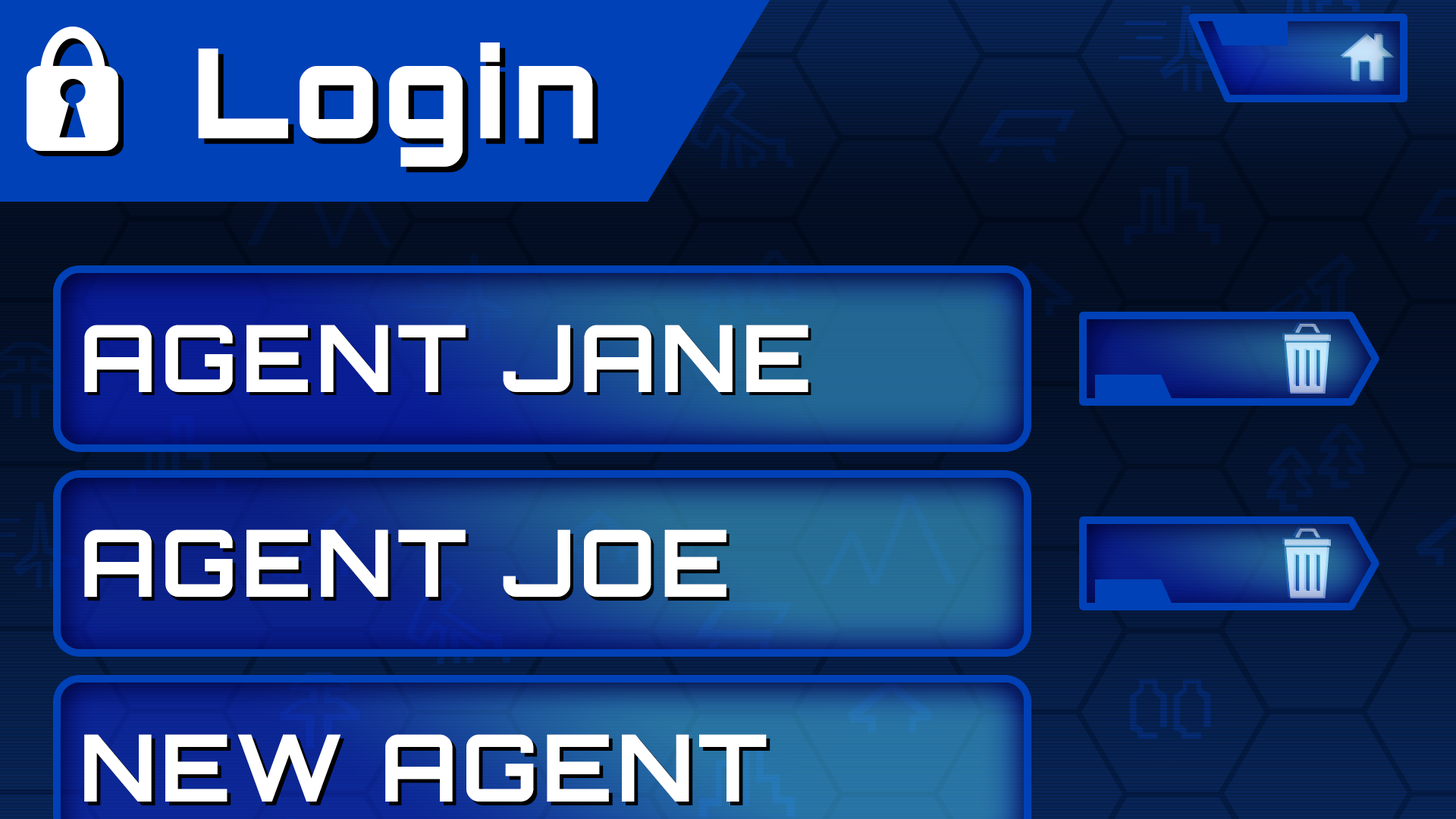
<style>
.page{position:relative;width:1456px;height:819px}
.page>*{position:absolute;margin:0}
.t1{font:124.1px "Orbitron-Black";letter-spacing:0.04em;color:#ffffff}
.t2{font:92.7px "Orbitron-Bold";letter-spacing:0.04em;color:#ffffff}
</style>
<div class="page">
<p class="t1" style="left:198px;top:42px;width:395px;height:125px">Login</p>
<p class="t1" style="left:204px;top:48px;width:394px;height:125px">Login</p>
<p class="t2" style="left:84px;top:325px;width:724px;height:67px">AGENT JANE</p>
<p class="t2" style="left:87px;top:328px;width:724px;height:67px">AGENT JANE</p>
<p class="t2" style="left:84px;top:529px;width:642px;height:68px">AGENT JOE</p>
<p class="t2" style="left:87px;top:533px;width:643px;height:68px">AGENT JOE</p>
<p class="t2" style="left:84px;top:734px;width:683px;height:68px">NEW AGENT</p>
<p class="t2" style="left:88px;top:738px;width:682px;height:67px">NEW AGENT</p>
</div>
